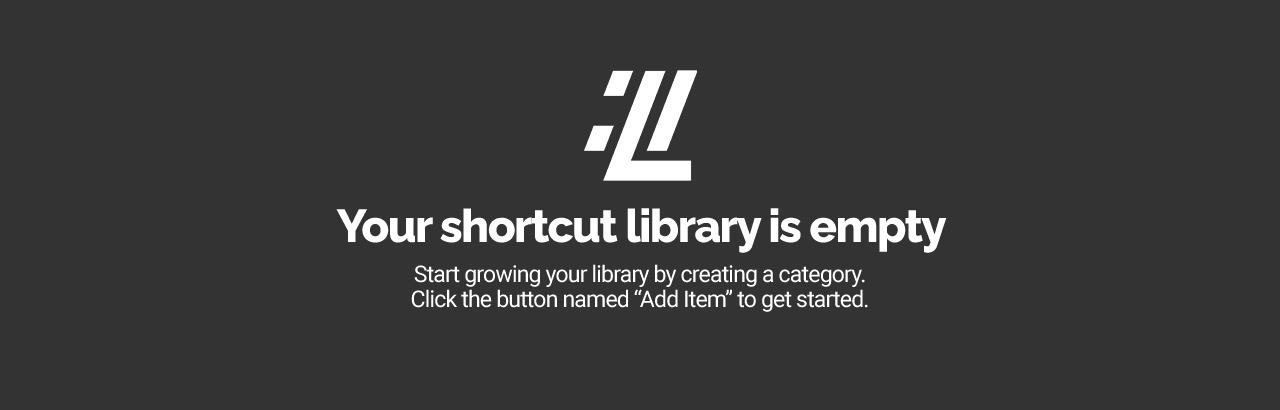
<style>
.page{position:relative;width:1280px;height:410px;background:#333333}
.page>*{position:absolute;margin:0}
.t1{font:46px "Raleway-ExtraBold";letter-spacing:-0.035em;color:#ffffff}
.t2{font:23px/25px "Roboto-Regular";letter-spacing:-0.035em;color:#ffffff}
</style>
<div class="page">
<p class="t1" style="left:336px;top:208px;width:611px;height:45px">Your shortcut library is empty</p>
<p class="t2" style="left:411px;top:264px;width:457px;height:48px;text-align:center">Start growing your library by creating a category.<br>Click the button named “Add Item” to get started.</p>
</div>
